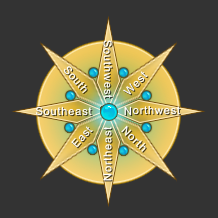
<style>
.page{position:relative;width:218px;height:218px;background:#333333}
.page>*{position:absolute;margin:0}
.t1{font:11px "ArialMT";letter-spacing:0.075em;color:#ffffff}
</style>
<div class="page">
<p class="t1" style="left:103px;top:40px;width:10px;height:59px;rotate:89deg">Southwest</p>
<p class="t1" style="left:63px;top:66px;width:24px;height:27px;rotate:49deg">South</p>
<p class="t1" style="left:123px;top:71px;width:25px;height:24px;rotate:-46deg">West</p>
<p class="t1" style="left:35px;top:106px;width:57px;height:10px;rotate:-1deg">Southeast</p>
<p class="t1" style="left:124px;top:105px;width:57px;height:11px">Northwest</p>
<p class="t1" style="left:71px;top:126px;width:22px;height:22px;rotate:-48deg">East</p>
<p class="t1" style="left:103px;top:126px;width:9px;height:55px;rotate:-90deg">Northeast</p>
<p class="t1" style="left:121px;top:125px;width:25px;height:27px;rotate:44deg">North</p>
</div>
